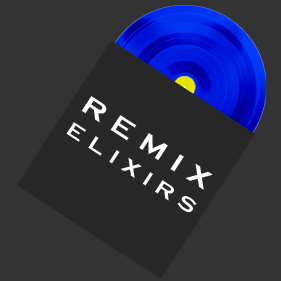
<style>
.page{position:relative;width:281px;height:281px;background:#333333}
.page>*{position:absolute;margin:0}
.t1{font:23px "Cornerstone";letter-spacing:0.32em;color:#ffffff;scale:1.18 1}
.t2{font:14px "Cornerstone";letter-spacing:0.32em;color:#ffffff;scale:1.18 1}
.t3{font:30px "Cornerstone";letter-spacing:0.32em;color:#ffffff;scale:1.18 1}
</style>
<div class="page">
<p class="t1" style="left:66px;top:96px;width:147px;height:117px;rotate:33deg"><span class="t2"><br><br></span><span class="t3">remix<br></span>elixirs</p>
</div>
